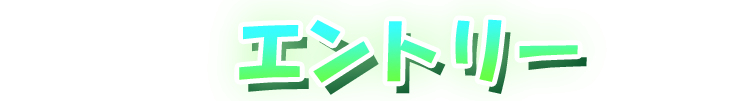
<style>
.page{position:relative;width:754px;height:101px;background:#ffffff}
.page>*{position:absolute;margin:0}
.t1{font:69.7px "HGSoeiKakupoptai"}
</style>
<div class="page">
<p class="t1" style="left:239px;top:19px;width:339px;height:64px">エントリー</p>
</div>
